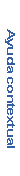
<style>
.page{position:relative;width:20px;height:176px;background:#ffffff}
.page>*{position:absolute;margin:0}
.t1{font:11.2px "Arial-BoldMT";letter-spacing:-0.05em;color:#355fa5;scale:1.43 1}
</style>
<div class="page">
<p class="t1" style="left:5px;top:29px;width:10px;height:119px;rotate:90deg">Ayuda contextual</p>
</div>
